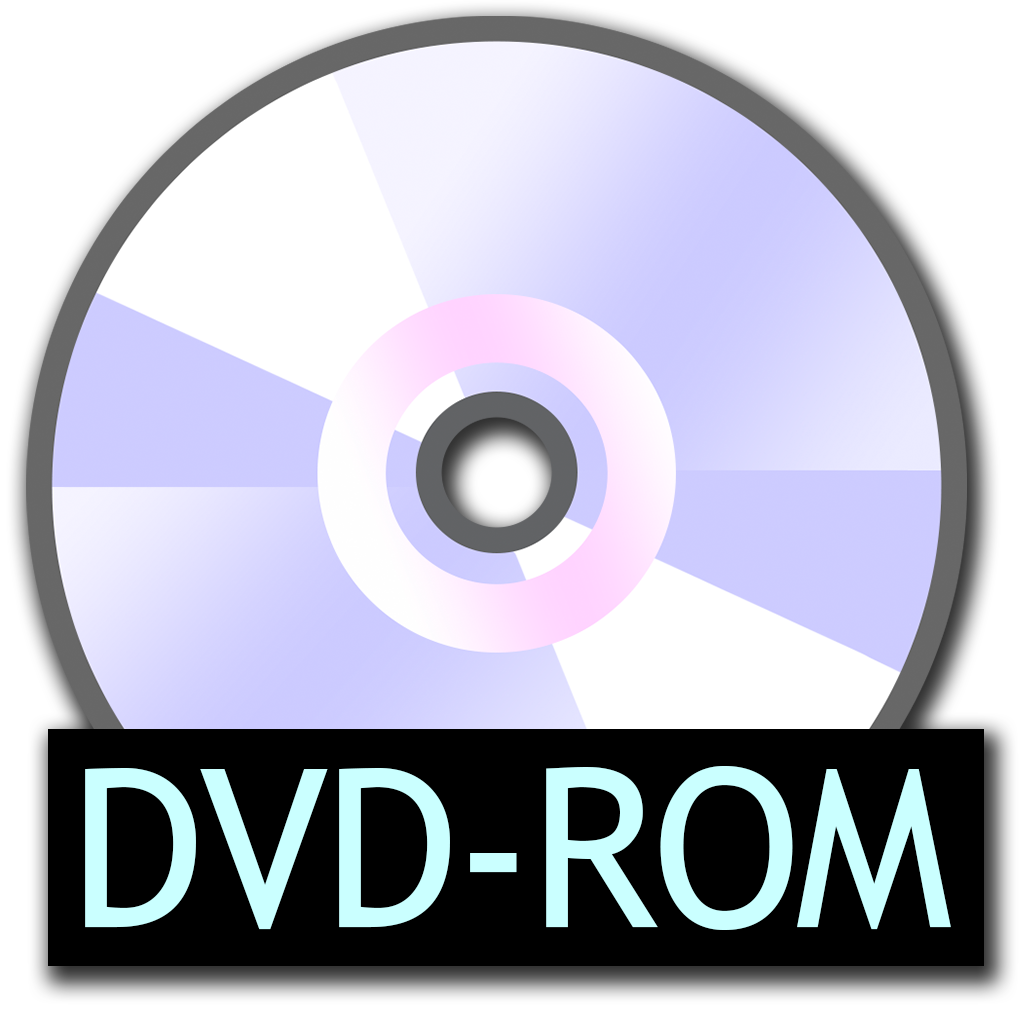
<style>
.page{position:relative;width:1024px;height:1024px;background:#ffffff}
.page>*{position:absolute;margin:0}
.t1{font:220.9px "TrebuchetMS";letter-spacing:-0.025em;color:#caffff}
</style>
<div class="page">
<p class="t1" style="left:85px;top:766px;width:866px;height:164px">DVD-ROM</p>
</div>
